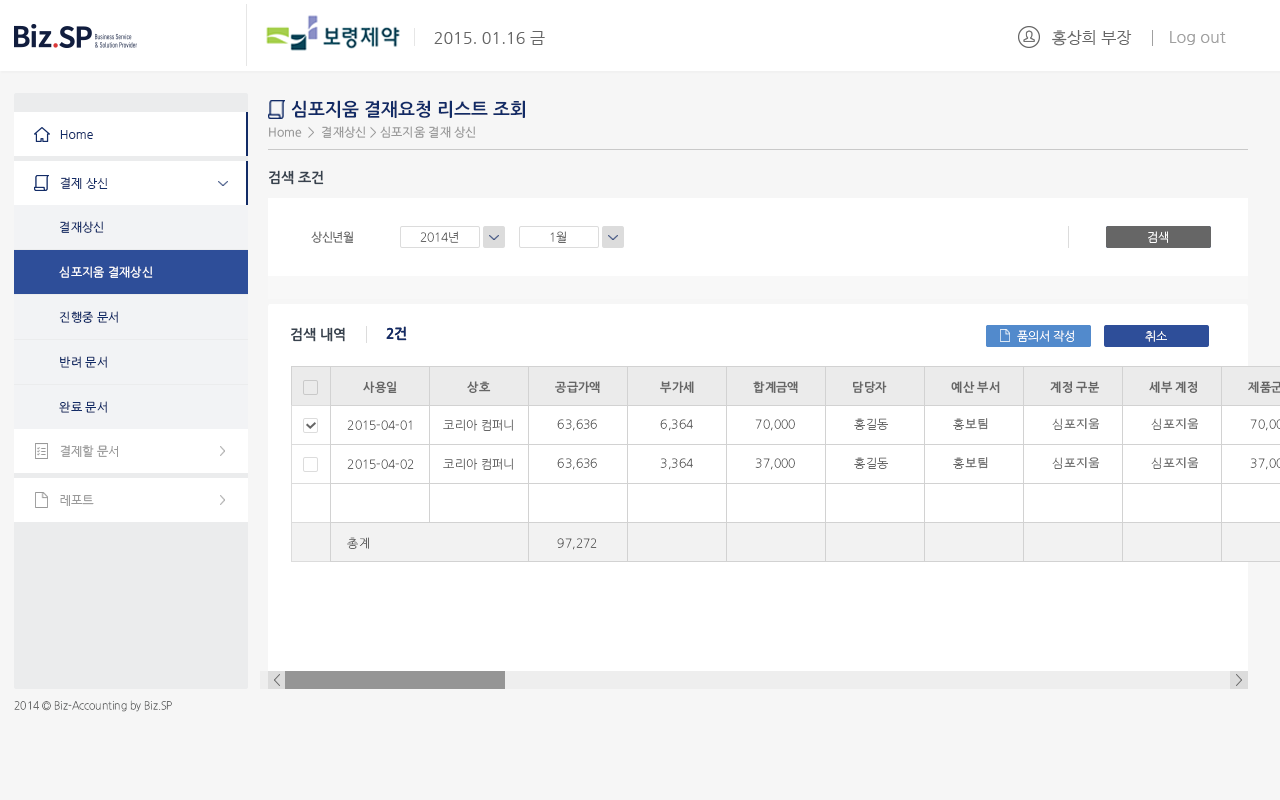
<style>
.page{position:relative;width:1280px;height:800px;background:#ffffff}
.page>*{position:absolute;margin:0}
.t1{font:16px "NanumGothic";color:#666666}
.t2{font:16px "NanumGothic";color:#a0a0a0}
.t3{font:18px "NanumGothicOTFBold";color:#122b66}
.t4{font:12px "NanumGothicOTF";color:#999999}
.t5{font:12px "NanumGothic";color:#122b66}
.t6{font:14px "NanumGothicOTFBold";color:#38424e}
.t7{font:12px "NanumGothicOTF";color:#122b66}
.t8{font:12px "NanumGothicOTF";letter-spacing:-0.025em;color:#666666}
.t9{font:12px "NanumGothicOTFLight";letter-spacing:-0.025em;color:#666666}
.t10{font:12px "NanumGothicOTFLight";letter-spacing:-0.025em;color:#ffffff}
.t11{font:12px "NanumGothicOTF";color:#ffffff}
.t12{font:14px "NanumGothicOTFBold";color:#122b66}
.t13{font:12px "NanumGothicOTFBold";color:#666666}
.t14{font:12px "NanumGothicOTFLight";color:#666666}
.t15{font:12px "AppleGothic";color:#666666}
.t16{font:12px "NanumGothic";color:#999999}
.t17{font:12px "NanumGothicOTFLight"}
.t18{font:11px "NanumGothicOTFLight";color:#6c6d6d;scale:0.94 1}
</style>
<div class="page">
<p class="t1" style="left:1052px;top:30px;width:80px;height:16px">홍상희 부장</p>
<p class="t1" style="left:434px;top:31px;width:111px;height:14px">2015. 01.16 금</p>
<p class="t2" style="left:1170px;top:31px;width:56px;height:14px">Log out</p>
<p class="t3" style="left:291px;top:100px;width:234px;height:18px">심포지움 결재요청 리스트 조회</p>
<p class="t4" style="left:269px;top:126px;width:207px;height:12px">Home  &gt;  결재상신 &gt; 심포지움 결재 상신</p>
<p class="t5" style="left:60px;top:130px;width:33px;height:9px">Home</p>
<p class="t5" style="left:60px;top:130px;width:33px;height:9px">Home</p>
<p class="t6" style="left:269px;top:170px;width:55px;height:15px">검색 조건</p>
<p class="t5" style="left:60px;top:177px;width:48px;height:12px">결제 상신</p>
<p class="t7" style="left:60px;top:221px;width:44px;height:12px">결재상신</p>
<p class="t8" style="left:311px;top:231px;width:42px;height:12px">상신년월</p>
<p class="t9" style="left:420px;top:231px;width:39px;height:12px">2014년</p>
<p class="t9" style="left:550px;top:231px;width:16px;height:12px">1월</p>
<p class="t10" style="left:1148px;top:231px;width:20px;height:12px">검색</p>
<p class="t10" style="left:1148px;top:231px;width:20px;height:12px">검색</p>
<p class="t11" style="left:59px;top:266px;width:94px;height:12px">심포지움 결재상신</p>
<p class="t7" style="left:59px;top:311px;width:59px;height:12px">진행중 문서</p>
<p class="t6" style="left:291px;top:327px;width:54px;height:15px">검색 내역</p>
<p class="t12" style="left:386px;top:326px;width:21px;height:15px">2건</p>
<p class="t12" style="left:386px;top:326px;width:21px;height:15px">2건</p>
<p class="t10" style="left:1017px;top:330px;width:57px;height:12px">품의서 작성</p>
<p class="t10" style="left:1017px;top:330px;width:57px;height:12px">품의서 작성</p>
<p class="t10" style="left:1145px;top:330px;width:22px;height:12px">취소</p>
<p class="t7" style="left:60px;top:356px;width:47px;height:12px">반려 문서</p>
<p class="t13" style="left:363px;top:381px;width:34px;height:12px">사용일</p>
<p class="t13" style="left:363px;top:381px;width:34px;height:12px">사용일</p>
<p class="t13" style="left:467px;top:381px;width:24px;height:12px">상호</p>
<p class="t13" style="left:467px;top:381px;width:24px;height:12px">상호</p>
<p class="t13" style="left:555px;top:381px;width:45px;height:12px">공급가액</p>
<p class="t13" style="left:555px;top:381px;width:45px;height:12px">공급가액</p>
<p class="t13" style="left:660px;top:381px;width:34px;height:12px">부가세</p>
<p class="t13" style="left:660px;top:381px;width:34px;height:12px">부가세</p>
<p class="t13" style="left:753px;top:381px;width:45px;height:12px">합계금액</p>
<p class="t13" style="left:753px;top:381px;width:45px;height:12px">합계금액</p>
<p class="t13" style="left:853px;top:381px;width:34px;height:12px">담당자</p>
<p class="t13" style="left:951px;top:381px;width:49px;height:12px">예산 부서</p>
<p class="t13" style="left:1050px;top:381px;width:50px;height:12px">계정 구분</p>
<p class="t13" style="left:1149px;top:381px;width:49px;height:12px">세부 계정</p>
<p class="t7" style="left:59px;top:401px;width:48px;height:12px">완료 문서</p>
<p class="t14" style="left:347px;top:420px;width:65px;height:10px">2015-04-01</p>
<p class="t14" style="left:347px;top:420px;width:65px;height:10px">2015-04-01</p>
<p class="t14" style="left:347px;top:420px;width:65px;height:10px">2015-04-01</p>
<p class="t14" style="left:347px;top:420px;width:65px;height:10px">2015-04-01</p>
<p class="t14" style="left:443px;top:419px;width:70px;height:12px">코리아 컴퍼니</p>
<p class="t14" style="left:557px;top:419px;width:40px;height:12px">63,636</p>
<p class="t14" style="left:557px;top:419px;width:40px;height:12px">63,636</p>
<p class="t14" style="left:557px;top:419px;width:40px;height:12px">63,636</p>
<p class="t14" style="left:557px;top:419px;width:40px;height:12px">63,636</p>
<p class="t14" style="left:660px;top:419px;width:33px;height:12px">6,363</p>
<p class="t14" style="left:660px;top:419px;width:33px;height:12px">6,364</p>
<p class="t14" style="left:660px;top:419px;width:33px;height:12px">6,363</p>
<p class="t14" style="left:660px;top:419px;width:33px;height:12px">6,364</p>
<p class="t14" style="left:755px;top:419px;width:40px;height:12px">70,000</p>
<p class="t14" style="left:755px;top:419px;width:40px;height:12px">70,000</p>
<p class="t14" style="left:755px;top:419px;width:40px;height:12px">70,000</p>
<p class="t14" style="left:755px;top:419px;width:40px;height:12px">70,000</p>
<p class="t14" style="left:854px;top:418px;width:34px;height:12px">홍길동</p>
<p class="t15" style="left:953px;top:418px;width:35px;height:12px"><span class="t14">홍</span>보팀</p>
<p class="t15" style="left:1052px;top:418px;width:48px;height:12px"><span class="t14">심</span>포지움</p>
<p class="t15" style="left:1151px;top:418px;width:48px;height:12px"><span class="t14">심</span>포지움</p>
<p class="t16" style="left:60px;top:445px;width:58px;height:12px">결제할 문서</p>
<p class="t16" style="left:60px;top:445px;width:58px;height:12px">결제할 문서</p>
<p class="t14" style="left:347px;top:459px;width:65px;height:10px">2015-04-01</p>
<p class="t14" style="left:347px;top:459px;width:67px;height:10px">2015-04-02</p>
<p class="t14" style="left:347px;top:459px;width:65px;height:10px">2015-04-01</p>
<p class="t14" style="left:347px;top:459px;width:67px;height:10px">2015-04-02</p>
<p class="t14" style="left:443px;top:458px;width:70px;height:12px">코리아 컴퍼니</p>
<p class="t14" style="left:557px;top:458px;width:40px;height:12px">63,636</p>
<p class="t14" style="left:557px;top:458px;width:40px;height:12px">63,636</p>
<p class="t14" style="left:557px;top:458px;width:40px;height:12px">63,636</p>
<p class="t14" style="left:557px;top:458px;width:40px;height:12px">63,636</p>
<p class="t17" style="left:660px;top:458px;width:33px;height:12px">6,363</p>
<p class="t14" style="left:660px;top:458px;width:33px;height:12px">3,364</p>
<p class="t17" style="left:660px;top:458px;width:33px;height:12px">6,363</p>
<p class="t14" style="left:660px;top:458px;width:33px;height:12px">3,364</p>
<p class="t14" style="left:755px;top:458px;width:40px;height:12px">70,000</p>
<p class="t14" style="left:755px;top:458px;width:40px;height:12px">37,000</p>
<p class="t14" style="left:755px;top:458px;width:40px;height:12px">70,000</p>
<p class="t14" style="left:755px;top:458px;width:40px;height:12px">37,000</p>
<p class="t14" style="left:854px;top:457px;width:34px;height:12px">홍길동</p>
<p class="t15" style="left:953px;top:457px;width:35px;height:12px"><span class="t14">홍</span>보팀</p>
<p class="t15" style="left:1052px;top:457px;width:48px;height:12px"><span class="t14">심</span>포지움</p>
<p class="t15" style="left:1151px;top:457px;width:48px;height:12px"><span class="t14">심</span>포지움</p>
<p class="t16" style="left:60px;top:495px;width:34px;height:11px">레포트</p>
<p class="t16" style="left:60px;top:495px;width:34px;height:11px">레포트</p>
<p class="t14" style="left:347px;top:537px;width:22px;height:12px">총계</p>
<p class="t14" style="left:347px;top:537px;width:22px;height:12px">총계</p>
<p class="t14" style="left:557px;top:538px;width:40px;height:12px">97,272</p>
<p class="t14" style="left:557px;top:538px;width:40px;height:12px">97,272</p>
<p class="t18" style="left:14px;top:700px;width:158px;height:12px">2014 © Biz-Accounting by Biz.SP</p>
</div>
